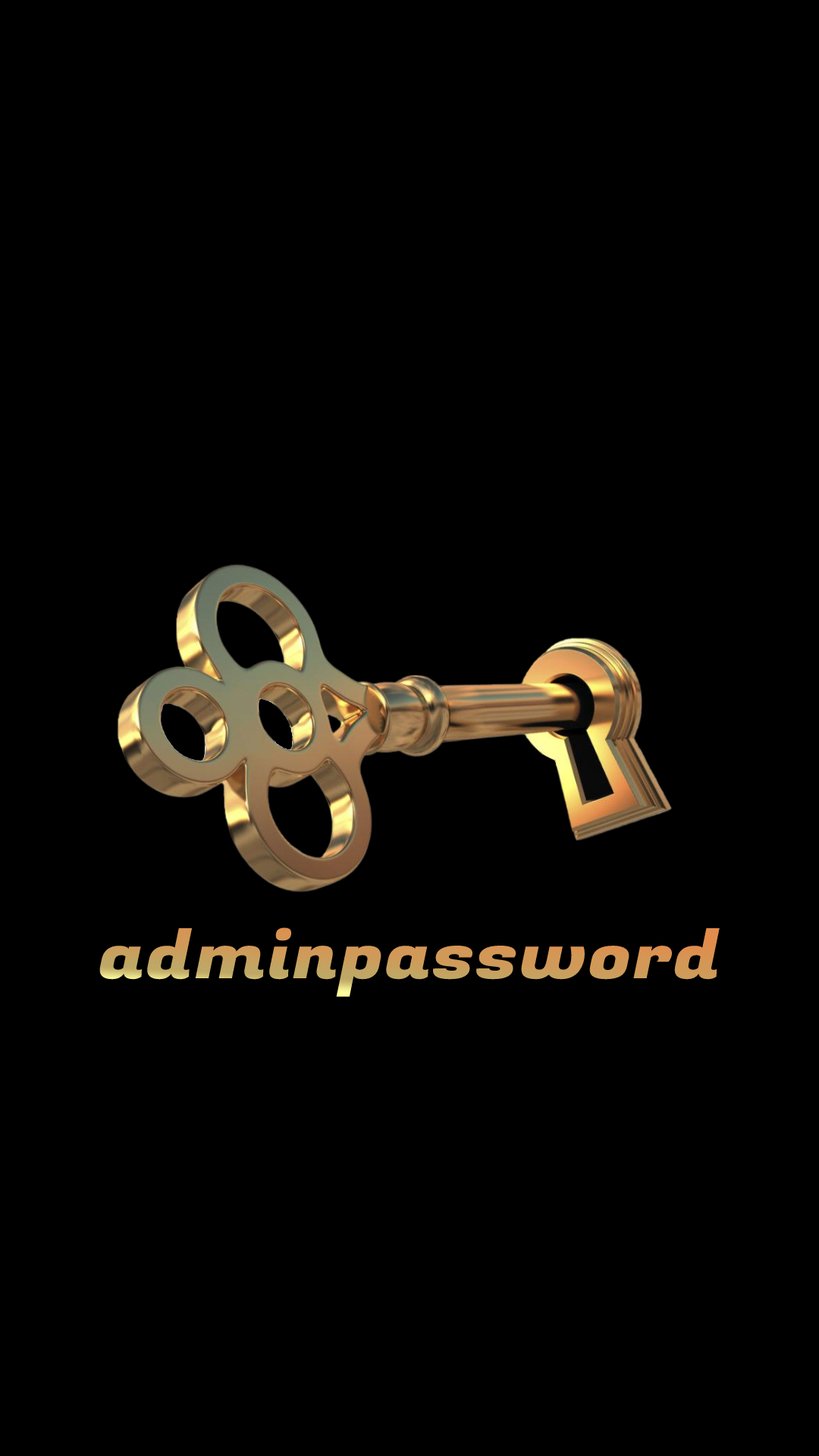
<style>
.page{position:relative;width:819px;height:1456px;background:#000000}
.page>*{position:absolute;margin:0}
.t1{font:65.8px "FugazOne-Regular";letter-spacing:0.02em;color:#ce9c5b;scale:1.17 1}
</style>
<div class="page">
<p class="t1" style="left:99px;top:927px;width:621px;height:70px">adminpassword</p>
</div>
